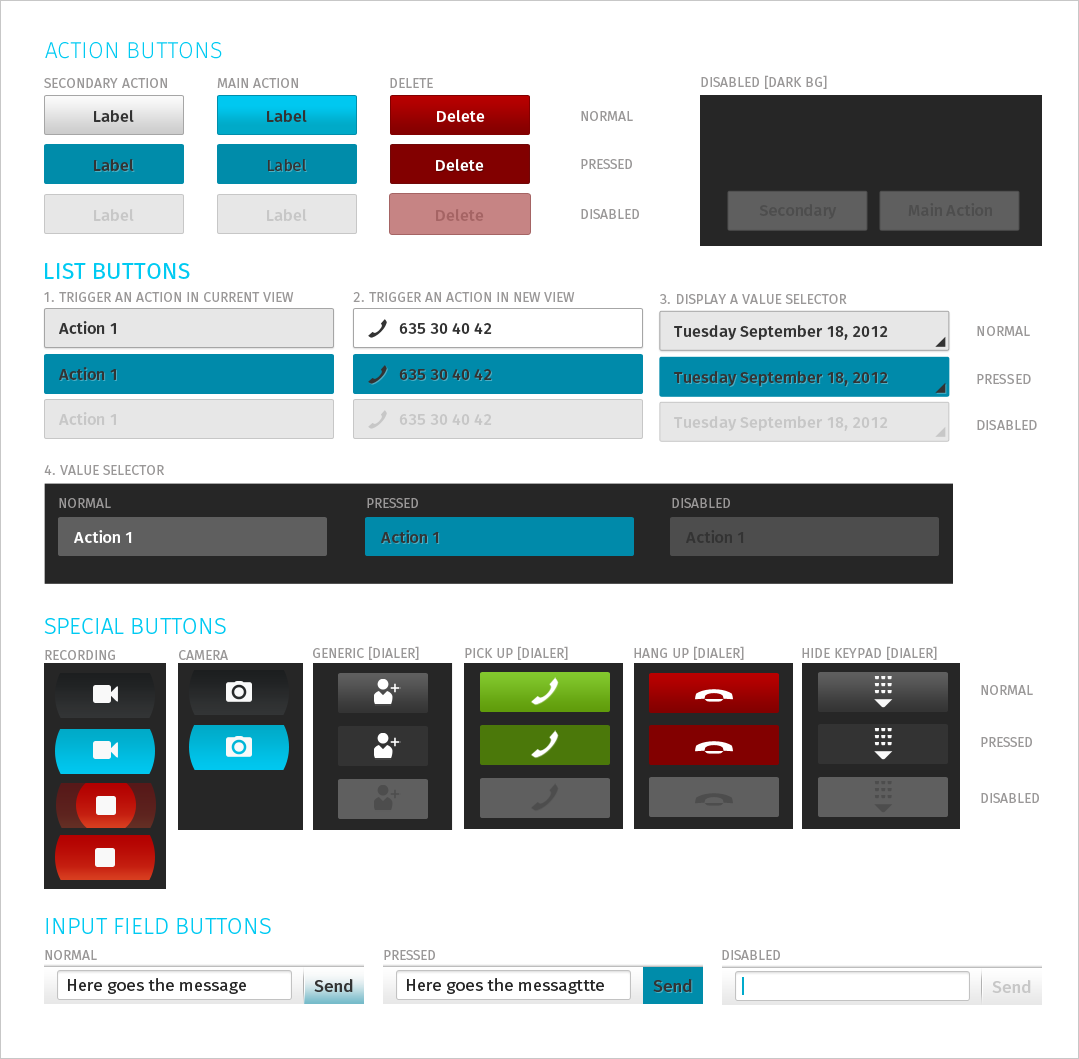
<style>
.page{position:relative;width:1079px;height:1059px;background:#ffffff}
.page>*{position:absolute;margin:0}
.t1{font:22.9px "MozLight";color:#00caf2;text-transform:uppercase}
.t2{font:13.8px "Moz";color:#9a9898;text-transform:uppercase}
.t3{font:16px "MozMedium";color:#333333}
.t4{font:16px "MozMedium";color:#ffffff}
.t5{font:16px "Moz";color:#333333}
.t6{font:16px "MozMedium";color:#c7c7c7}
.t7{font:16px "MozMedium";color:#a56464}
.t8{font:16px "MozMedium";color:#4a4a4a}
.t9{font:22.9px "Moz";color:#00caf2;text-transform:uppercase}
.t10{font:22.9px "MozLight";color:#00caf2}
.t11{font:17.2px "Moz";color:#262626}
.t12{font:17.2px "MozMedium";color:#333333}
.t13{font:17.2px "MozMedium";color:#c7c7c7}
</style>
<div class="page">
<p class="t1" style="left:45px;top:42px;width:177px;height:17px">ACTION BUTTONS</p>
<p class="t2" style="left:44px;top:78px;width:123px;height:10px">Secondary action</p>
<p class="t2" style="left:217px;top:78px;width:81px;height:10px">Main action</p>
<p class="t2" style="left:390px;top:78px;width:43px;height:10px">Delete</p>
<p class="t2" style="left:701px;top:75px;width:126px;height:14px">disabled [Dark BG]</p>
<p class="t3" style="left:94px;top:110px;width:40px;height:12px">Label</p>
<p class="t3" style="left:267px;top:110px;width:40px;height:12px">Label</p>
<p class="t4" style="left:437px;top:110px;width:48px;height:12px">Delete</p>
<p class="t2" style="left:581px;top:111px;width:52px;height:10px">normal</p>
<p class="t3" style="left:94px;top:159px;width:40px;height:12px">Label</p>
<p class="t5" style="left:268px;top:159px;width:39px;height:12px">Label</p>
<p class="t4" style="left:436px;top:159px;width:48px;height:12px">Delete</p>
<p class="t2" style="left:581px;top:159px;width:51px;height:10px">pressed</p>
<p class="t6" style="left:94px;top:209px;width:40px;height:12px">Label</p>
<p class="t6" style="left:267px;top:209px;width:40px;height:12px">Label</p>
<p class="t7" style="left:436px;top:209px;width:48px;height:12px">Delete</p>
<p class="t2" style="left:581px;top:209px;width:58px;height:10px">disabled</p>
<p class="t8" style="left:759px;top:204px;width:78px;height:15px">Secondary</p>
<p class="t8" style="left:908px;top:203px;width:84px;height:13px">Main Action</p>
<p class="t9" style="left:45px;top:263px;width:145px;height:16px">LIST BUTTONS</p>
<p class="t2" style="left:44px;top:292px;width:250px;height:10px">1. Trigger an action in current view</p>
<p class="t2" style="left:353px;top:292px;width:222px;height:10px">2. Trigger an action in new view</p>
<p class="t2" style="left:660px;top:294px;width:187px;height:10px">3. Display a Value Selector</p>
<p class="t3" style="left:59px;top:321px;width:57px;height:13px">Action 1</p>
<p class="t3" style="left:399px;top:323px;width:93px;height:11px">635 30 40 42</p>
<p class="t3" style="left:674px;top:325px;width:214px;height:15px">Tuesday September 18, 2012</p>
<p class="t2" style="left:977px;top:326px;width:53px;height:10px">normal</p>
<p class="t3" style="left:59px;top:367px;width:57px;height:13px">Action 1</p>
<p class="t3" style="left:399px;top:369px;width:93px;height:11px">635 30 40 42</p>
<p class="t3" style="left:674px;top:371px;width:214px;height:15px">Tuesday September 18, 2012</p>
<p class="t2" style="left:977px;top:374px;width:54px;height:10px">Pressed</p>
<p class="t6" style="left:59px;top:412px;width:57px;height:13px">Action 1</p>
<p class="t6" style="left:399px;top:414px;width:93px;height:11px">635 30 40 42</p>
<p class="t6" style="left:674px;top:416px;width:214px;height:15px">Tuesday September 18, 2012</p>
<p class="t2" style="left:977px;top:420px;width:60px;height:10px">disabled</p>
<p class="t2" style="left:44px;top:465px;width:120px;height:10px">4. Value sElector</p>
<p class="t2" style="left:59px;top:498px;width:52px;height:10px">normal</p>
<p class="t2" style="left:367px;top:498px;width:51px;height:10px">Pressed</p>
<p class="t2" style="left:672px;top:498px;width:58px;height:10px">disabled</p>
<p class="t4" style="left:74px;top:530px;width:58px;height:13px">Action 1</p>
<p class="t3" style="left:381px;top:530px;width:58px;height:13px">Action 1</p>
<p class="t3" style="left:686px;top:530px;width:58px;height:13px">Action 1</p>
<p class="t10" style="left:44px;top:618px;width:182px;height:16px">SPECIAL BUTTONS</p>
<p class="t2" style="left:45px;top:650px;width:70px;height:10px">Recording</p>
<p class="t2" style="left:179px;top:650px;width:49px;height:10px">Camera</p>
<p class="t2" style="left:313px;top:646px;width:106px;height:14px">generic [dialer]</p>
<p class="t2" style="left:465px;top:646px;width:103px;height:14px">pick up [dialer]</p>
<p class="t2" style="left:634px;top:646px;width:110px;height:14px">Hang up [dialer]</p>
<p class="t2" style="left:802px;top:646px;width:135px;height:14px">hide keypad [dialer]</p>
<p class="t2" style="left:981px;top:685px;width:52px;height:10px">normal</p>
<p class="t2" style="left:981px;top:737px;width:51px;height:10px">Pressed</p>
<p class="t2" style="left:981px;top:793px;width:58px;height:10px">disabled</p>
<p class="t1" style="left:46px;top:918px;width:225px;height:16px">INPUT FIELD BUTTONS</p>
<p class="t2" style="left:45px;top:950px;width:52px;height:10px">Normal</p>
<p class="t2" style="left:384px;top:950px;width:51px;height:10px">pressed</p>
<p class="t2" style="left:722px;top:950px;width:58px;height:10px">disabled</p>
<p class="t11" style="left:68px;top:978px;width:178px;height:16px">Here goes the message</p>
<p class="t12" style="left:314px;top:979px;width:39px;height:13px">Send</p>
<p class="t11" style="left:407px;top:978px;width:197px;height:16px">Here goes the messagttte</p>
<p class="t12" style="left:653px;top:979px;width:39px;height:13px">Send</p>
<p class="t13" style="left:992px;top:980px;width:39px;height:13px">Send</p>
</div>
